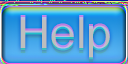
<style>
.page{position:relative;width:128px;height:64px}
.page>*{position:absolute;margin:0}
.t1{font:46px "ArialMT"}
</style>
<div class="page">
<p class="t1" style="left:20px;top:14px;width:90px;height:43px">Help</p>
</div>
